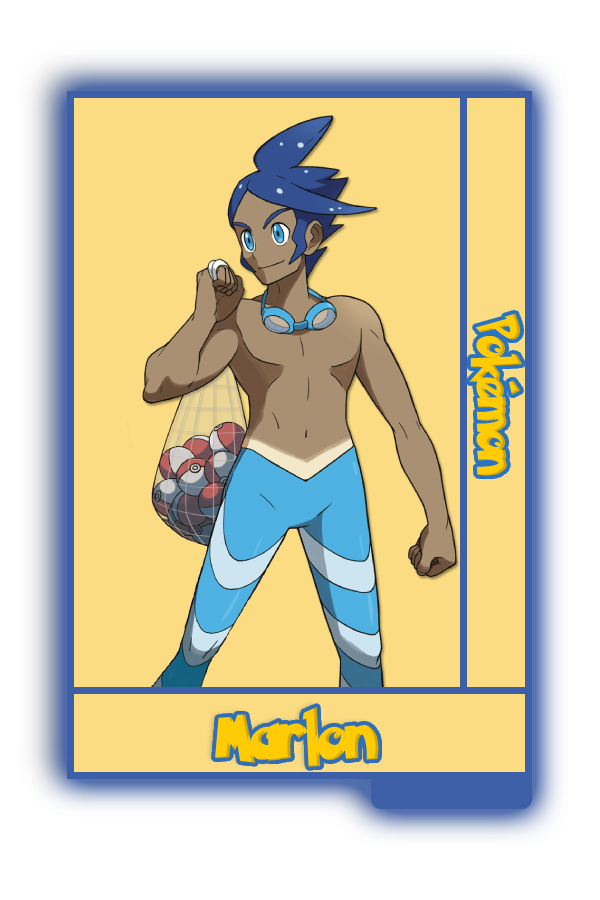
<style>
.page{position:relative;width:600px;height:900px;background:#fbdc83}
.page>*{position:absolute;margin:0}
.t1{font:48.8px "PokemonSolidNormal";color:#ffcb05;scale:0.8 1}
.t2{font:56.6px "PokemonSolidNormal";color:#ffcb05;scale:0.92 1}
</style>
<div class="page">
<p class="t1" style="left:469px;top:313px;width:54px;height:163px;rotate:90deg">Pokémon</p>
<p class="t2" style="left:215px;top:706px;width:164px;height:61px">Marlon</p>
</div>
